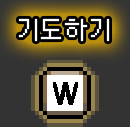
<style>
.page{position:relative;width:130px;height:127px;background:#333333}
.page>*{position:absolute;margin:0}
.t1{font:36px "Silver";color:#ffffff}
</style>
<div class="page">
<p class="t1" style="left:18px;top:18px;width:92px;height:24px">기도하기</p>
</div>
